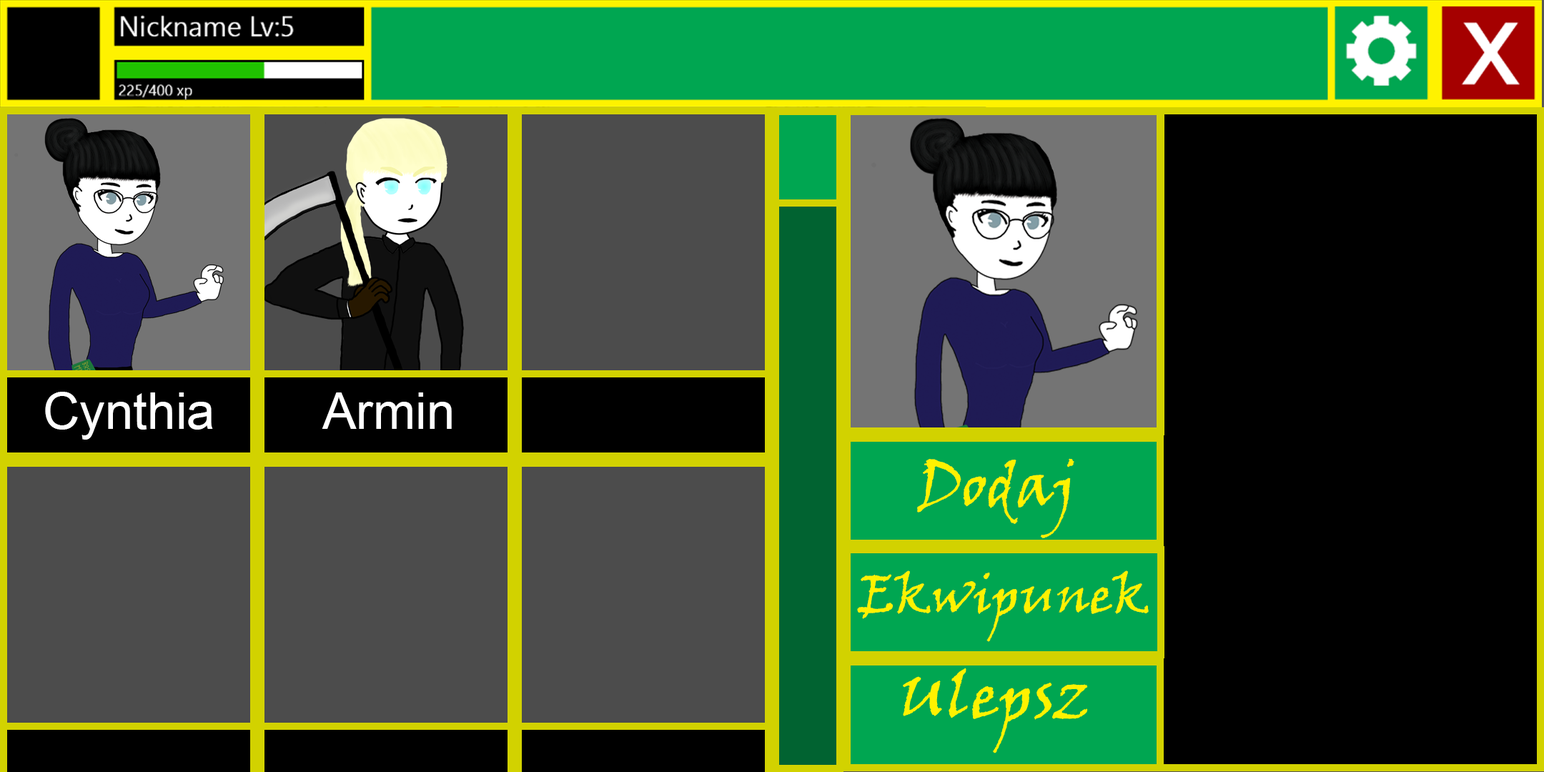
<style>
.page{position:relative;width:1544px;height:772px;background:#000000}
.page>*{position:absolute;margin:0}
.t1{font:50.8px "ArialMT";color:#ffffff}
.t2{font:59.3px "VinerHandITC";color:#fff200}
.t3{font:52.2px "VinerHandITC";color:#fff200}
</style>
<div class="page">
<p class="t1" style="left:45px;top:392px;width:168px;height:48px">Cynthia</p>
<p class="t1" style="left:322px;top:393px;width:130px;height:36px">Armin</p>
<p class="t2" style="left:917px;top:458px;width:158px;height:81px">Dodaj</p>
<p class="t3" style="left:857px;top:571px;width:292px;height:71px">Ekwipunek</p>
</div>
